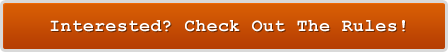
<style>
.page{position:relative;width:448px;height:52px}
.page>*{position:absolute;margin:0}
.t1{font:18px "CourierNewPS-BoldMT";letter-spacing:0.025em;color:#ffffff}
</style>
<div class="page">
<p class="t1" style="left:50px;top:20px;width:355px;height:12px">Interested? Check Out The Rules!</p>
</div>
